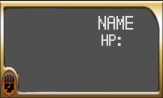
<style>
.page{position:relative;width:163px;height:98px;background:#505050}
.page>*{position:absolute;margin:0}
.t1{font:24px "PokemonDPPt";color:#e1e1e1}
.t2{font:20px "PokemonDPPt";color:#e1e1e1}
</style>
<div class="page">
<p class="t1" style="left:98px;top:15px;width:36px;height:15px">NAME</p>
<p class="t2" style="left:101px;top:34px;width:20px;height:12px">HP:</p>
</div>
